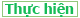
<style>
.page{position:relative;width:80px;height:18px;background:#ffffff}
.page>*{position:absolute;margin:0}
.t1{font:13.9px "Tahoma-Bold";color:#16bc58}
</style>
<div class="page">
<p class="t1" style="left:5px;top:3px;width:69px;height:14px">Thực hiện</p>
</div>
